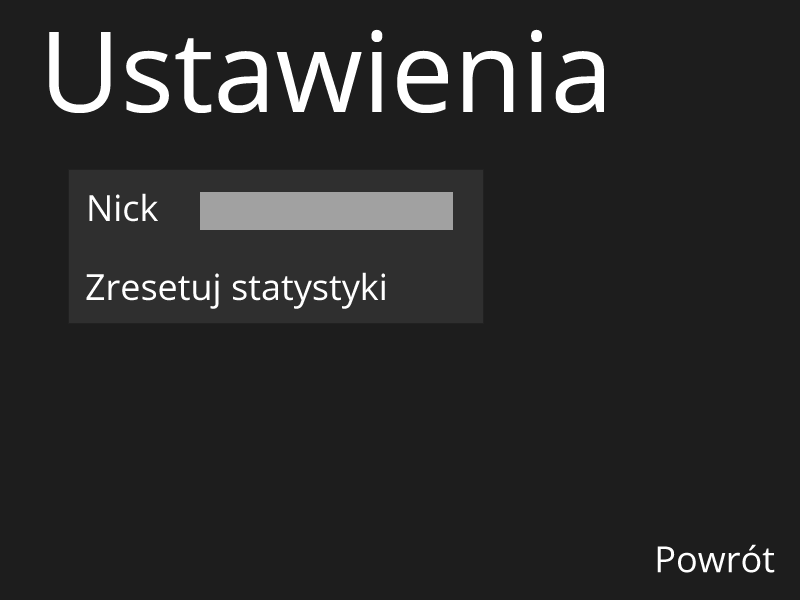
<style>
.page{position:relative;width:800px;height:600px;background:#1d1d1d}
.page>*{position:absolute;margin:0}
.t1{font:111.8px "OpenSans";color:#ffffff}
.t2{font:36px "OpenSans";color:#ffffff}
</style>
<div class="page">
<p class="t1" style="left:49px;top:29px;width:555px;height:84px">Ustawienia</p>
<p class="t2" style="left:89px;top:193px;width:69px;height:29px">Nick</p>
<p class="t2" style="left:86px;top:272px;width:299px;height:37px">Zresetuj statystyki</p>
<p class="t2" style="left:657px;top:544px;width:118px;height:29px">Powrót</p>
</div>
